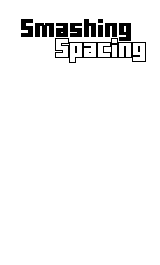
<style>
.page{position:relative;width:160px;height:265px;background:#ffffff}
.page>*{position:absolute;margin:0}
.t1{font:18px "MinercraftoryRegular";color:#000000}
.t2{font:18px "MinercraftoryRegular";color:#ffffff}
</style>
<div class="page">
<p class="t1" style="left:21px;top:19px;width:110px;height:22px">Smashing</p>
<p class="t2" style="left:56px;top:39px;width:89px;height:23px">Spacing</p>
</div>
